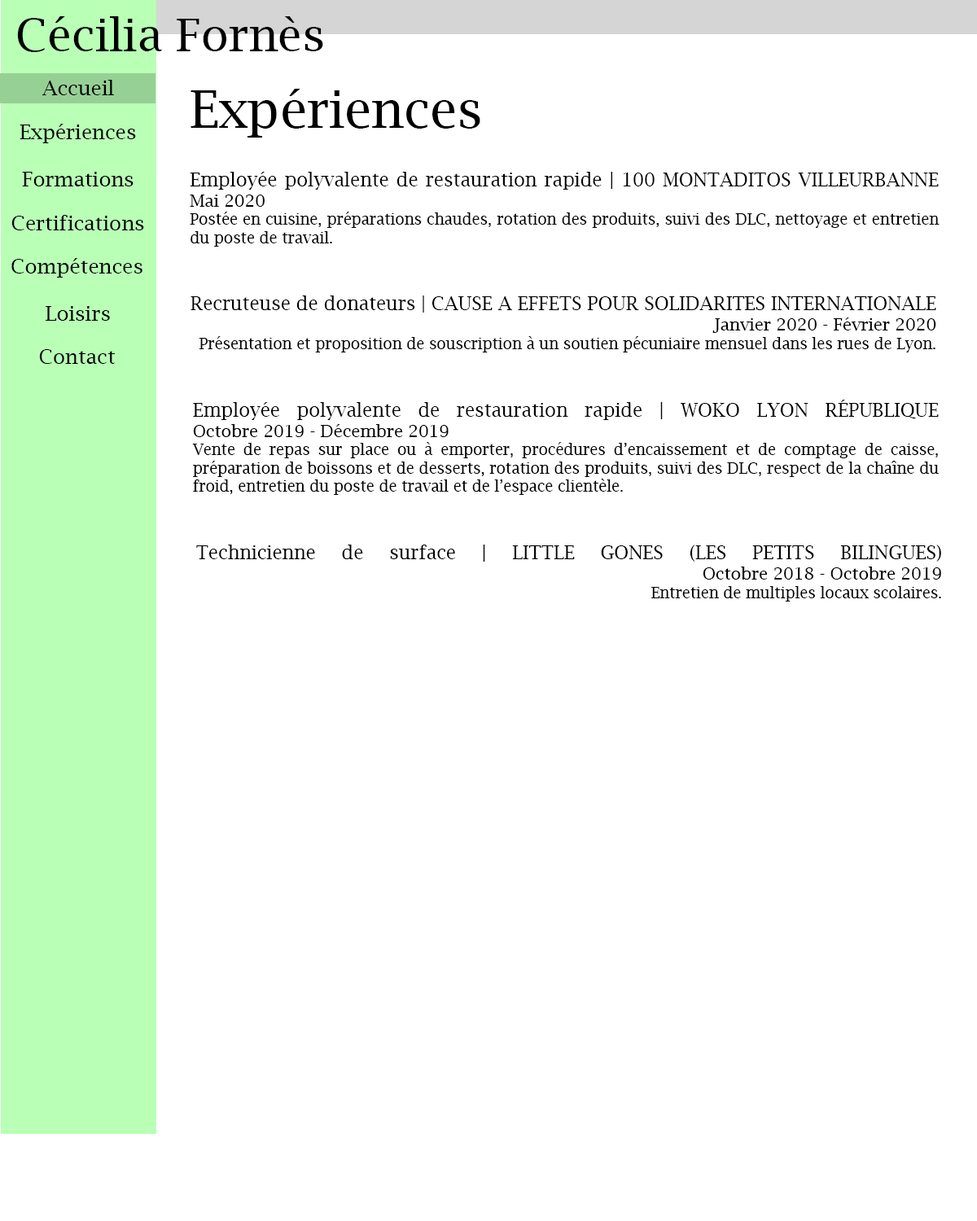
<style>
.page{position:relative;width:977px;height:1221px;background:#ffffff}
.page>*{position:absolute;margin:0}
.t1{font:45.8px "LucidaBright";color:#000000}
.t2{font:20.3px "LucidaBright";color:#000000}
.t3{font:50.9px "LucidaBright";color:#000000}
.t4{font:15.3px "LucidaBright";color:#000000}
.t5{font:18.7px "LucidaBright";color:#000000}
.t6{font:17px "LucidaBright";color:#000000}
</style>
<div class="page">
<p class="t1" style="left:17px;top:16px;width:306px;height:36px">Cécilia Fornès</p>
<p class="t2" style="left:42px;top:80px;width:72px;height:15px">Accueil</p>
<p class="t3" style="left:190px;top:89px;width:290px;height:49px">Expériences</p>
<p class="t2" style="left:20px;top:124px;width:116px;height:19px">Expériences</p>
<p class="t2" style="left:22px;top:172px;width:111px;height:14px">Formations</p>
<p class="t4" style="left:190px;top:172px;width:749px;height:75px;text-align:justify"><span class="t5">Employée polyvalente de restauration rapide | 100 MONTADITOS VILLEURBANNE<br></span><span class="t6">Mai 2020<br></span>Postée en cuisine, préparations chaudes, rotation des produits, suivi des DLC, nettoyage et entretien du poste de travail.</p>
<p class="t2" style="left:11px;top:215px;width:133px;height:15px">Certifications</p>
<p class="t2" style="left:11px;top:258px;width:131px;height:20px">Compétences</p>
<p class="t4" style="left:190px;top:295px;width:746px;height:57px;text-align:justify"><span class="t5">Recruteuse de donateurs | CAUSE A EFFETS POUR SOLIDARITES INTERNATIONALE<br></span><span class="t6">Janvier 2020 - Février 2020<br></span>Présentation et proposition de souscription à un soutien pécuniaire mensuel dans les rues de Lyon.</p>
<p class="t2" style="left:46px;top:306px;width:64px;height:15px">Loisirs</p>
<p class="t2" style="left:39px;top:349px;width:77px;height:15px">Contact</p>
<p class="t4" style="left:192px;top:400px;width:746px;height:95px;text-align:justify"><span class="t5">Employée polyvalente de restauration rapide | WOKO LYON RÉPUBLIQUE<br></span><span class="t6">Octobre 2019 - Décembre 2019<br></span>Vente de repas sur place ou à emporter, procédures d’encaissement et de comptage de caisse, préparation de boissons et de desserts, rotation des produits, suivi des DLC, respect de la chaîne du froid, entretien du poste de travail et de l’espace clientèle.<br><span class="t6">    rotation des produits, suivi des DLC, respect de la chaîne du froid, entretien du poste de travail et de l’espace clientèle.</span></p>
<p class="t5" style="left:196px;top:545px;width:745px;height:56px;text-align:justify">Technicienne de surface | LITTLE GONES (LES PETITS BILINGUES)<br><span class="t6">Octobre 2018 - Octobre 2019<br></span><span class="t4">Entretien de multiples locaux scolaires.</span></p>
</div>
